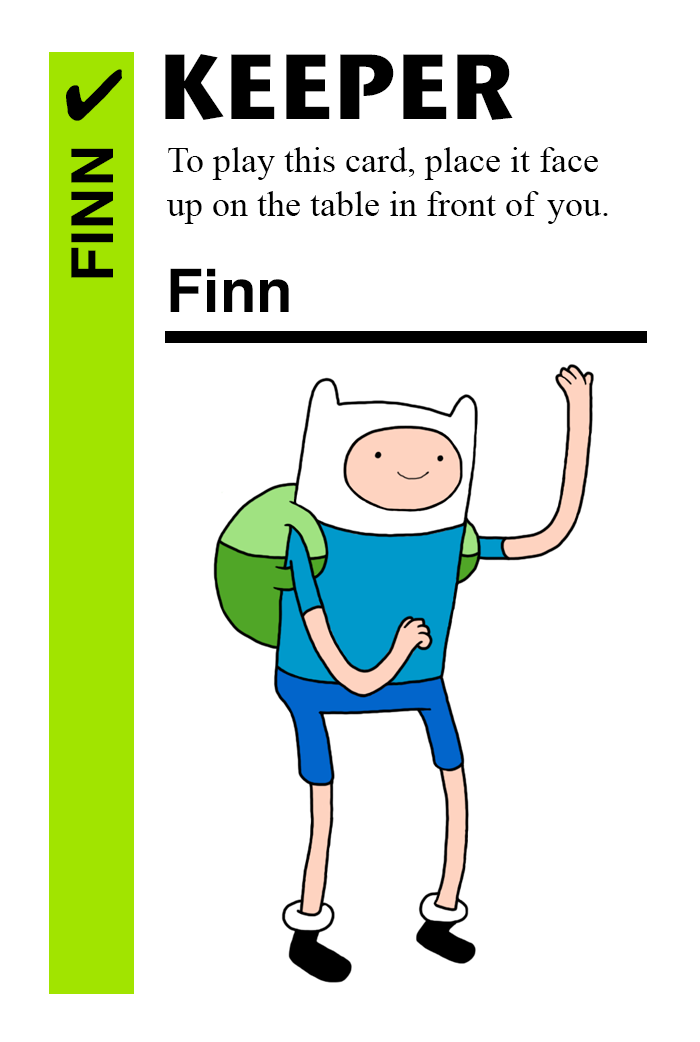
<style>
.page{position:relative;width:700px;height:1042px;background:#ffffff}
.page>*{position:absolute;margin:0}
.t1{font:92px "StoneSansITC-Bold";color:#000000}
.t2{font:72px "MS-Gothic";color:#000000}
.t3{font:58px "Helvetica-Bold";color:#000000}
.t4{font:36px "TimesNewRomanPSMT";color:#000000}
.t5{font:60px "Helvetica-Bold";color:#000000}
</style>
<div class="page">
<p class="t1" style="left:165px;top:54px;width:348px;height:66px">KEEPER</p>
<p class="t2" style="left:66px;top:69px;width:56px;height:52px">✔</p>
<p class="t3" style="left:71px;top:148px;width:42px;height:130px;rotate:-90deg">FINN</p>
<p class="t4" style="left:167px;top:147px;width:441px;height:77px">To play this card, place it face<br>up on the table in front of you.</p>
<p class="t5" style="left:170px;top:268px;width:119px;height:44px">Finn</p>
</div>
